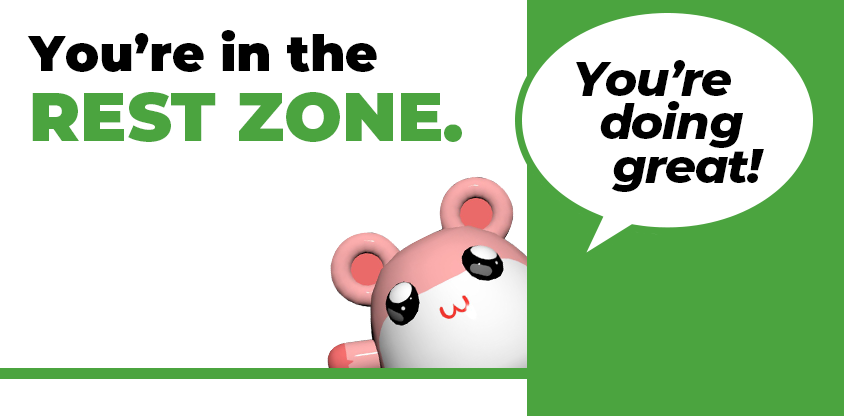
<style>
.page{position:relative;width:844px;height:416px;background:#ffffff}
.page>*{position:absolute;margin:0}
.t1{font:50px/40px "Montserrat-Black";color:#000000}
.t2{font:68.2px/69.9px "Montserrat-Black";color:#4ba43f;text-transform:uppercase}
.t3{font:47.6px/43.9px "Montserrat-ExtraBoldItalic";letter-spacing:-0.025em;color:#000000}
</style>
<div class="page">
<p class="t1" style="left:27px;top:30px;width:435px;height:112px">You’re in the<br><span class="t2">rest zone.</span></p>
<p class="t3" style="left:576px;top:60px;width:188px;height:132px">You’re<br>  doing<br>   great!</p>
</div>
